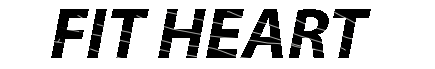
<style>
.page{position:relative;width:435px;height:69px;background:#ffffff}
.page>*{position:absolute;margin:0}
.t1{font:72px "MyriadPro-BoldIt";color:#000000}
</style>
<div class="page">
<p class="t1" style="left:51px;top:9px;width:320px;height:49px">FIT HEART</p>
</div>
